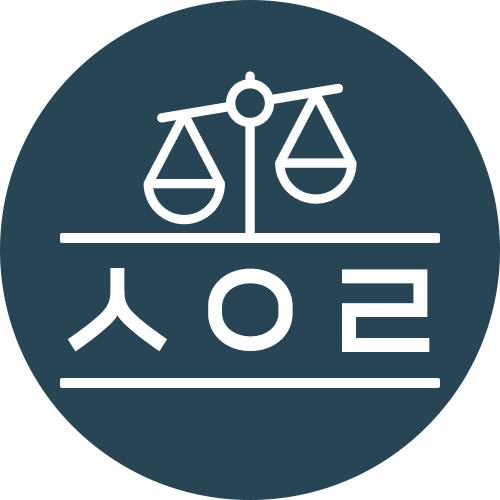
<style>
.page{position:relative;width:500px;height:500px;background:#274555}
.page>*{position:absolute;margin:0}
.t1{font:160.4px "NanumSquareOTFB";color:#ffffff;scale:0.91 1}
</style>
<div class="page">
<p class="t1" style="left:68px;top:268px;width:362px;height:84px">ㅅㅇㄹ</p>
</div>
